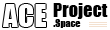
<style>
.page{position:relative;width:110px;height:30px;background:#ffffff}
.page>*{position:absolute;margin:0}
.t1{font:29.1px "Impact";color:#ffffff}
.t2{font:18.2px "Impact";color:#000000}
.t3{font:9.7px "Impact";color:#000000}
</style>
<div class="page">
<p class="t1" style="left:3px;top:4px;width:43px;height:23px">ACE</p>
<p class="t2" style="left:53px;top:3px;width:55px;height:16px">Project</p>
<p class="t3" style="left:53px;top:19px;width:28px;height:9px">.Space</p>
</div>
